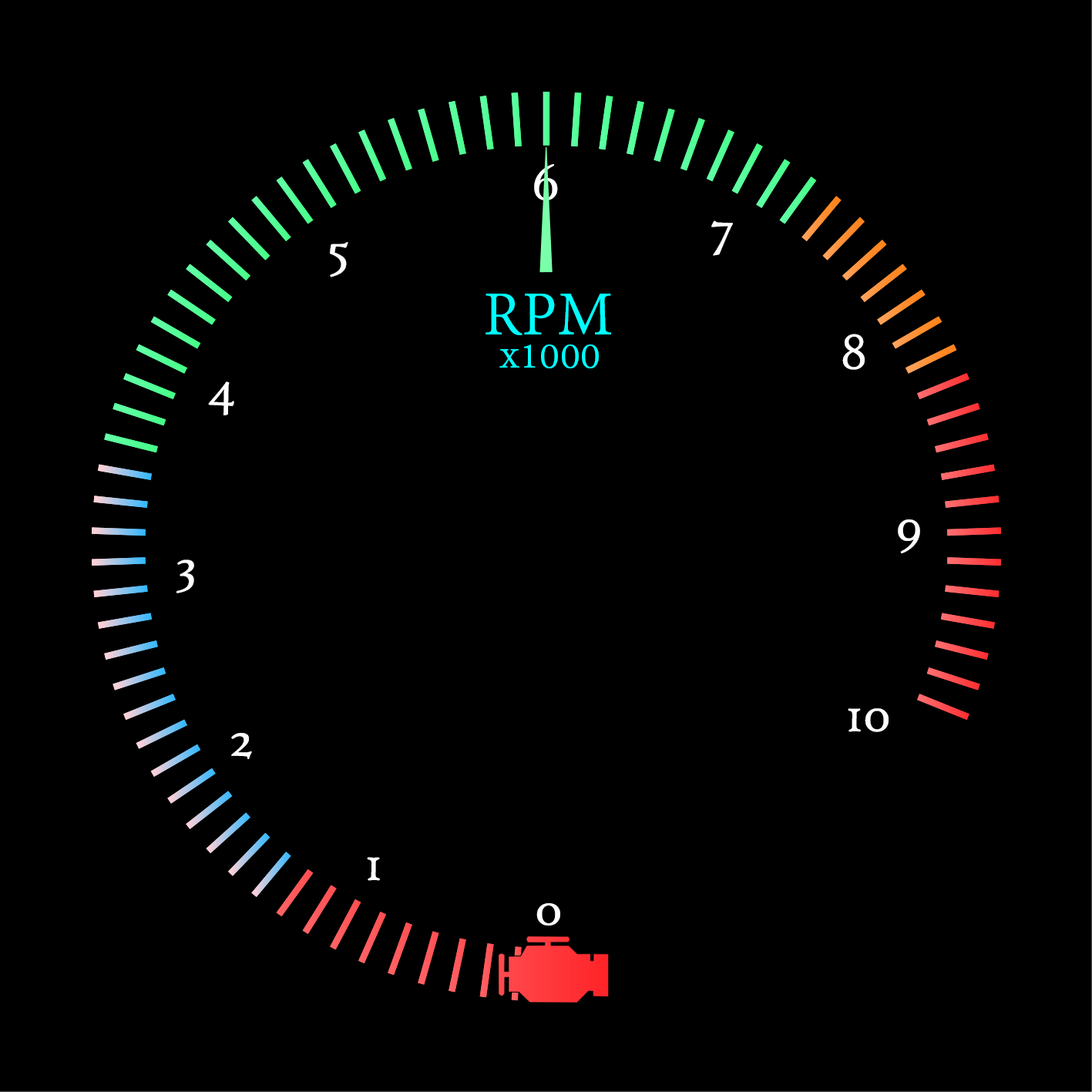
<style>
.page{position:relative;width:1092px;height:1092px;background:#000000}
.page>*{position:absolute;margin:0}
.t1{font:57.8px "HighTowerText-Reg";color:#ffffff}
.t2{font:67.4px "AdobeGurmukhi-Regular";color:#00ffff}
.t3{font:45px "AdobeGurmukhi-Regular";color:#00ffff}
</style>
<div class="page">
<p class="t1" style="left:534px;top:164px;width:24px;height:36px">6</p>
<p class="t1" style="left:711px;top:220px;width:22px;height:36px">7</p>
<p class="t1" style="left:330px;top:242px;width:18px;height:35px">5</p>
<p class="t2" style="left:485px;top:294px;width:126px;height:41px">RPM</p>
<p class="t1" style="left:842px;top:334px;width:23px;height:36px">8</p>
<p class="t3" style="left:499px;top:344px;width:100px;height:24px">x1000</p>
<p class="t1" style="left:208px;top:381px;width:26px;height:34px">4</p>
<p class="t1" style="left:898px;top:519px;width:22px;height:34px">9</p>
<p class="t1" style="left:176px;top:559px;width:18px;height:34px">3</p>
<p class="t1" style="left:848px;top:708px;width:41px;height:24px">10</p>
<p class="t1" style="left:231px;top:733px;width:21px;height:26px">2</p>
<p class="t1" style="left:367px;top:857px;width:13px;height:24px">1</p>
<p class="t1" style="left:536px;top:903px;width:24px;height:23px">0</p>
</div>
